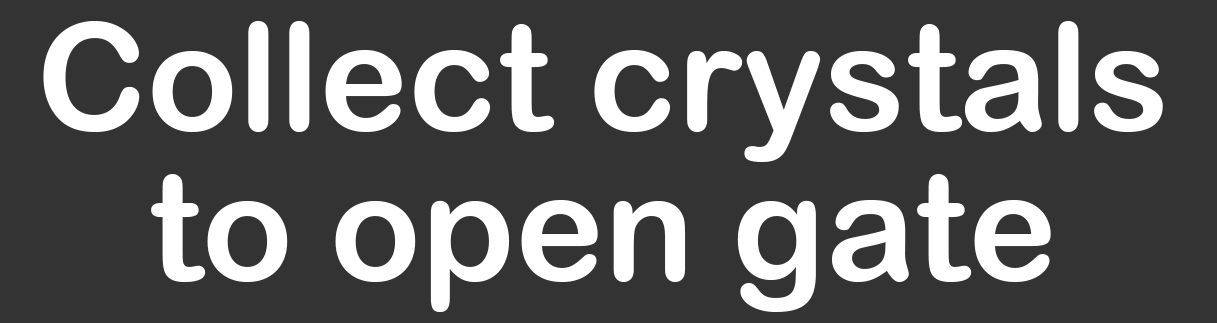
<style>
.page{position:relative;width:1217px;height:323px;background:#333333}
.page>*{position:absolute;margin:0}
.t1{font:150px/150px "ArialRoundedMTBold";color:#ffffff}
</style>
<div class="page">
<p class="t1" style="left:43px;top:21px;width:1120px;height:291px;text-align:center">Collect crystals<br>to open gate</p>
</div>
